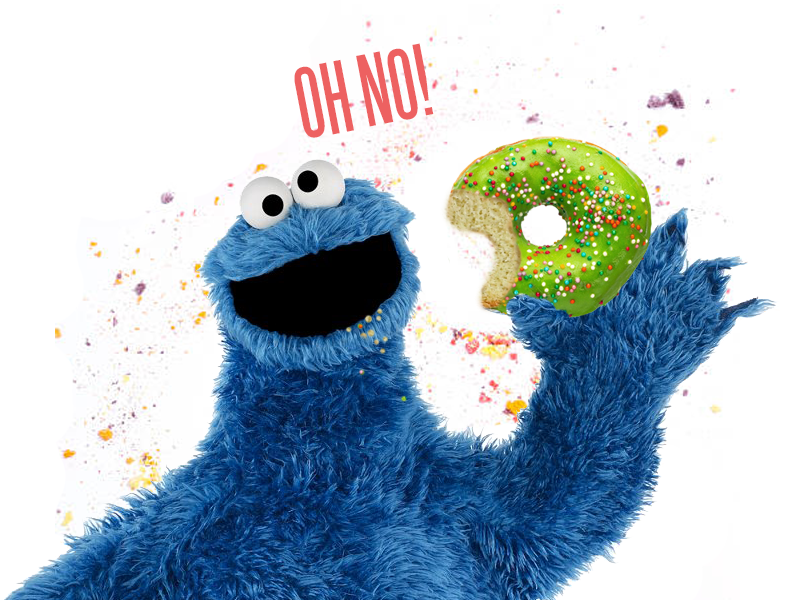
<style>
.page{position:relative;width:800px;height:600px;background:#ffffff}
.page>*{position:absolute;margin:0}
.t1{font:90px "Steelfish";color:#ed6161}
</style>
<div class="page">
<p class="t1" style="left:294px;top:43px;width:140px;height:95px;rotate:-11deg">OH NO!</p>
</div>
